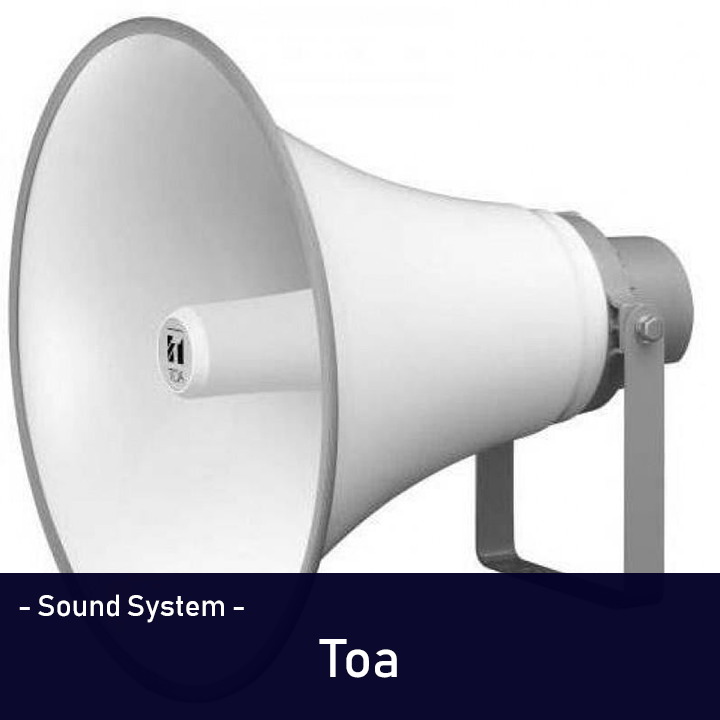
<style>
.page{position:relative;width:720px;height:720px;background:#ffffff}
.page>*{position:absolute;margin:0}
.t1{font:30px "Bahnschrift";color:#ffffff}
.t2{font:53.6px "Bahnschrift";color:#ffffff}
</style>
<div class="page">
<p class="t1" style="left:19px;top:594px;width:225px;height:29px">- Sound System -</p>
<p class="t2" style="left:319px;top:639px;width:78px;height:39px">Toa</p>
</div>
